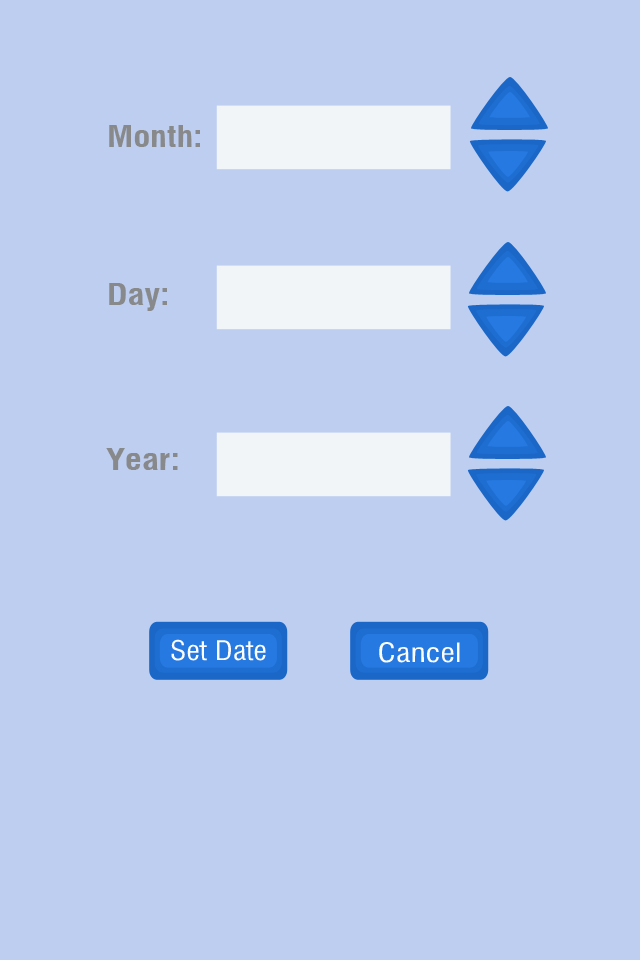
<style>
.page{position:relative;width:640px;height:960px;background:#becef0}
.page>*{position:absolute;margin:0}
.t1{font:29.5px "MilfordBold";color:#88898a}
</style>
<div class="page">
<p class="t1" style="left:109px;top:125px;width:91px;height:22px">Month:</p>
<p class="t1" style="left:109px;top:283px;width:58px;height:28px">Day:</p>
<p class="t1" style="left:106px;top:448px;width:72px;height:22px">Year:</p>
</div>
